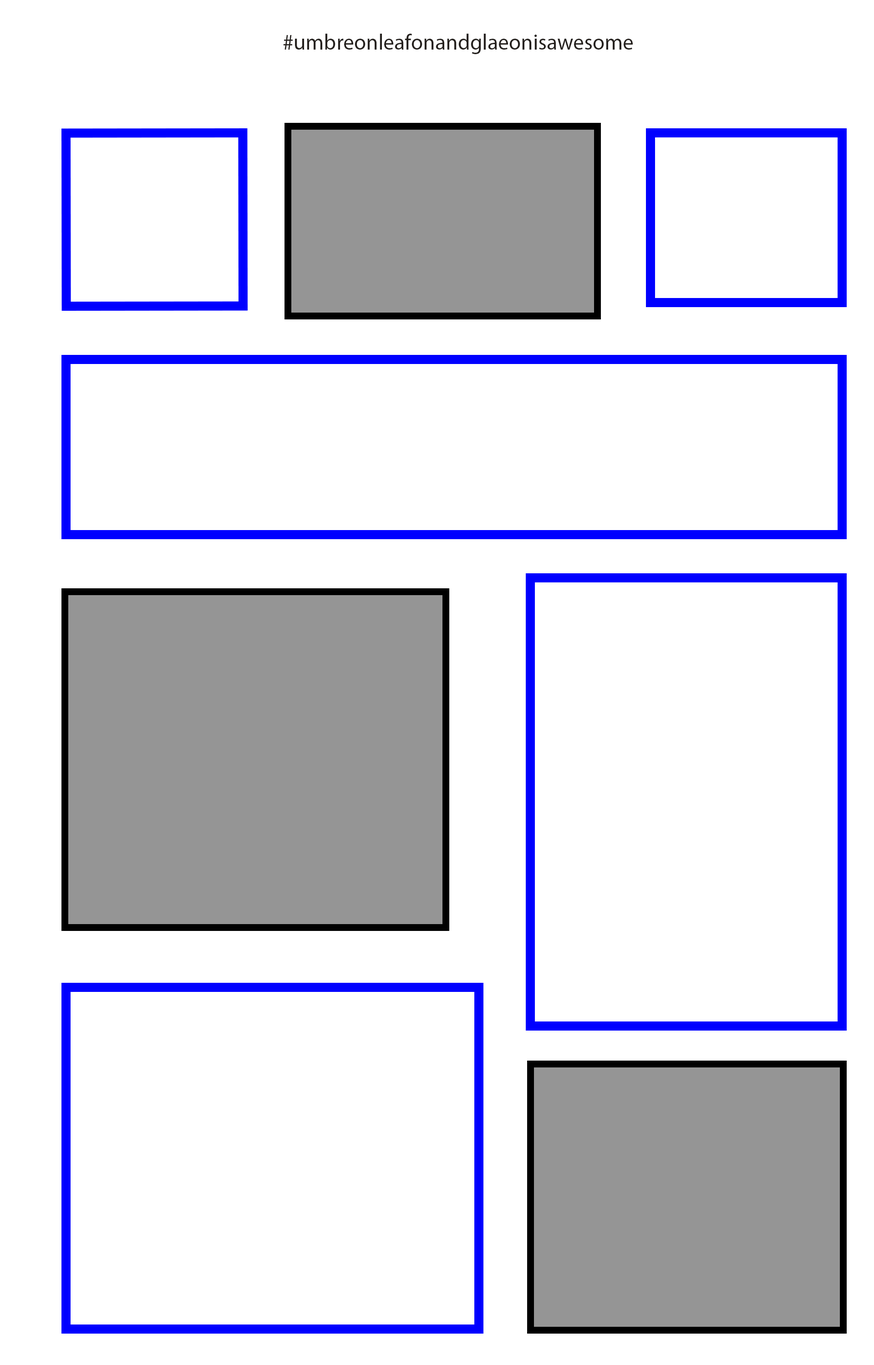
<style>
.page{position:relative;width:874px;height:1365px;background:#ffffff}
.page>*{position:absolute;margin:0}
.t1{font:21.8px "MyriadPro-Regular";color:#26221f}
</style>
<div class="page">
<p class="t1" style="left:283px;top:34px;width:349px;height:20px">#umbreonleafonandglaeonisawesome</p>
</div>
